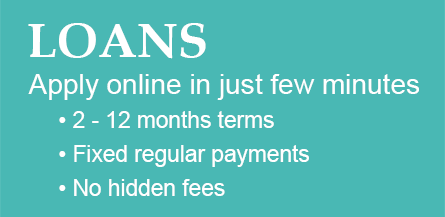
<style>
.page{position:relative;width:445px;height:217px;background:#49b8b4}
.page>*{position:absolute;margin:0}
.t1{font:49.4px "BookAntiqua-Bold";color:#ffffff}
.t2{font:28.1px "ArialMT";color:#ffffff}
.t3{font:22.7px/34px "ArialMT";color:#ffffff}
</style>
<div class="page">
<p class="t1" style="left:28px;top:23px;width:178px;height:36px">LOANS</p>
<p class="t2" style="left:28px;top:74px;width:391px;height:26px">Apply online in just few minutes</p>
<p class="t3" style="left:59px;top:111px;width:250px;height:85px">• 2 - 12 months terms<br> • Fixed regular payments<br> • No hidden fees</p>
</div>
